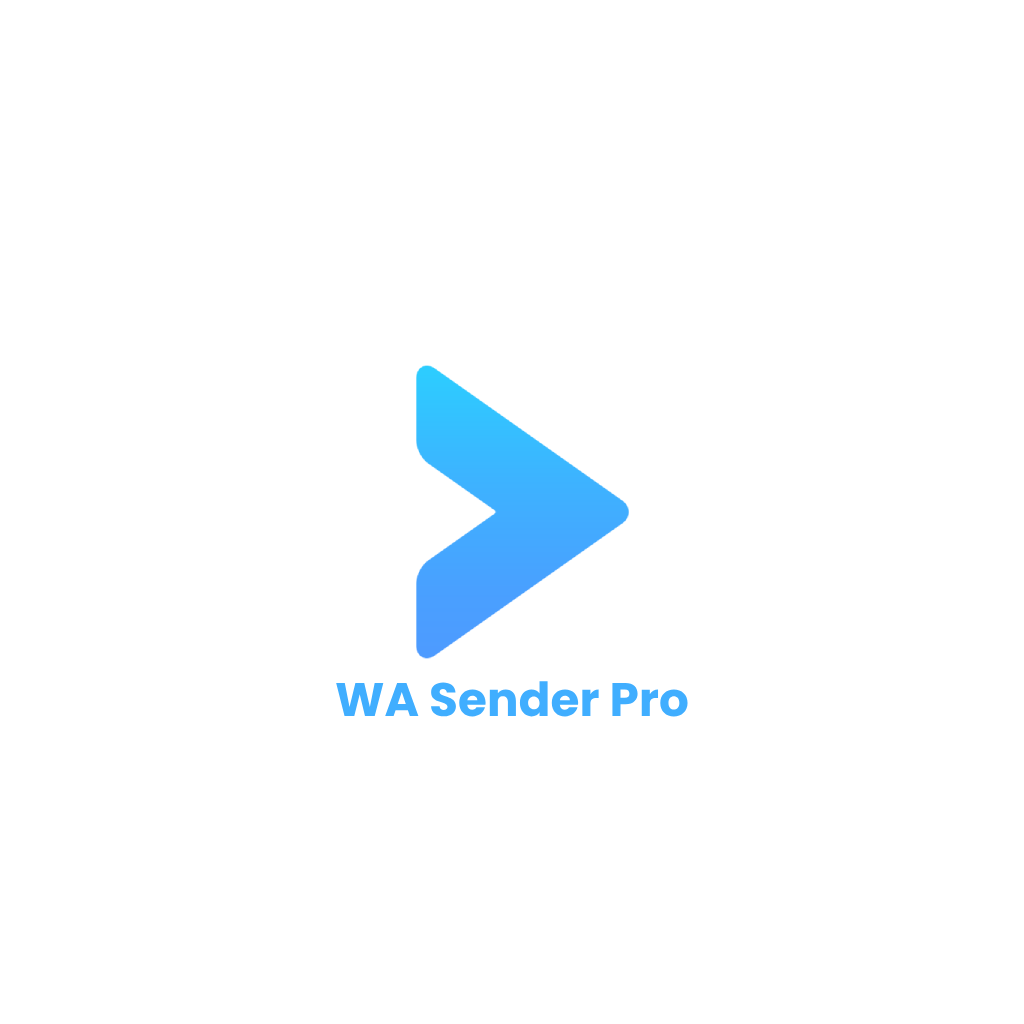
<style>
.page{position:relative;width:1024px;height:1024px;background:#ffffff}
.page>*{position:absolute;margin:0}
.t1{font:47px "Poppins-Bold";color:#40aeff}
</style>
<div class="page">
<p class="t1" style="left:336px;top:681px;width:352px;height:36px">WA Sender Pro</p>
</div>
